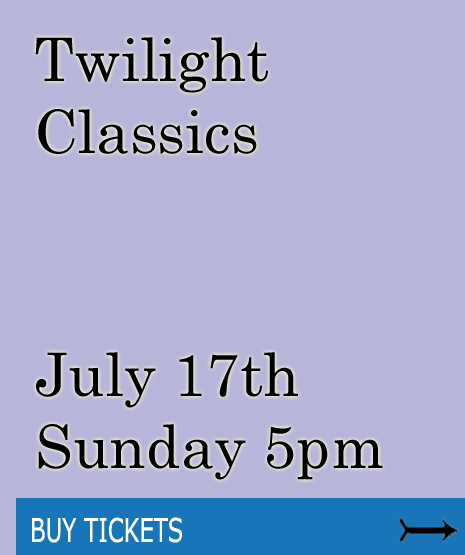
<style>
.page{position:relative;width:465px;height:555px;background:#b7b6da}
.page>*{position:absolute;margin:0}
.t1{font:60px "CenturySchoolbook";color:#000000}
.t2{font:32.9px "Verdana";color:#ffffff;scale:0.69 1}
</style>
<div class="page">
<p class="t1" style="left:35px;top:37px;width:233px;height:117px">Twilight <br>Classics</p>
<p class="t1" style="left:36px;top:352px;width:347px;height:128px">July 17th<br>Sunday 5pm</p>
<p class="t2" style="left:32px;top:517px;width:150px;height:26px">BUY TICKETS</p>
</div>
